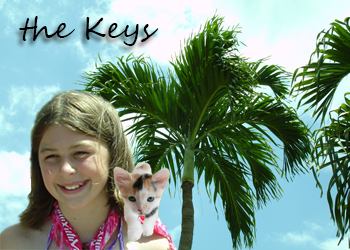
<style>
.page{position:relative;width:350px;height:250px}
.page>*{position:absolute;margin:0}
.t1{font:30px "SegoeScript";color:#000000}
</style>
<div class="page">
<p class="t1" style="left:19px;top:16px;width:140px;height:30px">the Keys</p>
</div>
